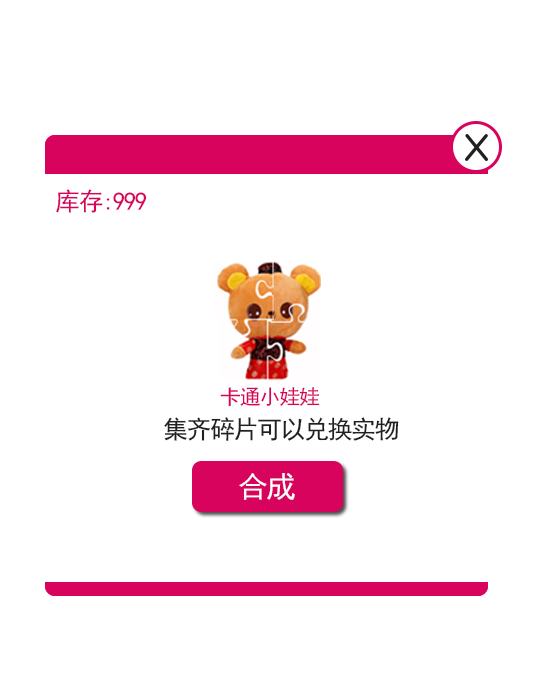
<style>
.page{position:relative;width:536px;height:695px;background:#ffffff}
.page>*{position:absolute;margin:0}
.t1{font:25px "SimHei";letter-spacing:-0.059em;color:#d8035d}
.t2{font:20.5px "SimHei";letter-spacing:-0.059em;color:#d8035d}
.t3{font:25px "SimHei";letter-spacing:-0.059em;color:#202020}
.t4{font:29.5px "SimHei";letter-spacing:-0.059em;color:#ffffff}
</style>
<div class="page">
<p class="t1" style="left:56px;top:189px;width:91px;height:24px">库存:999</p>
<p class="t2" style="left:220px;top:387px;width:100px;height:20px">卡通小娃娃</p>
<p class="t3" style="left:164px;top:417px;width:235px;height:24px">集齐碎片可以兑换实物</p>
<p class="t4" style="left:239px;top:473px;width:56px;height:27px">合成</p>
</div>
